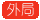
<style>
.page{position:relative;width:40px;height:20px;background:#f1321e}
.page>*{position:absolute;margin:0}
.t1{font:14px "YouYuan"}
</style>
<div class="page">
<p class="t1" style="left:7px;top:2px;width:27px;height:14px">外局</p>
</div>
